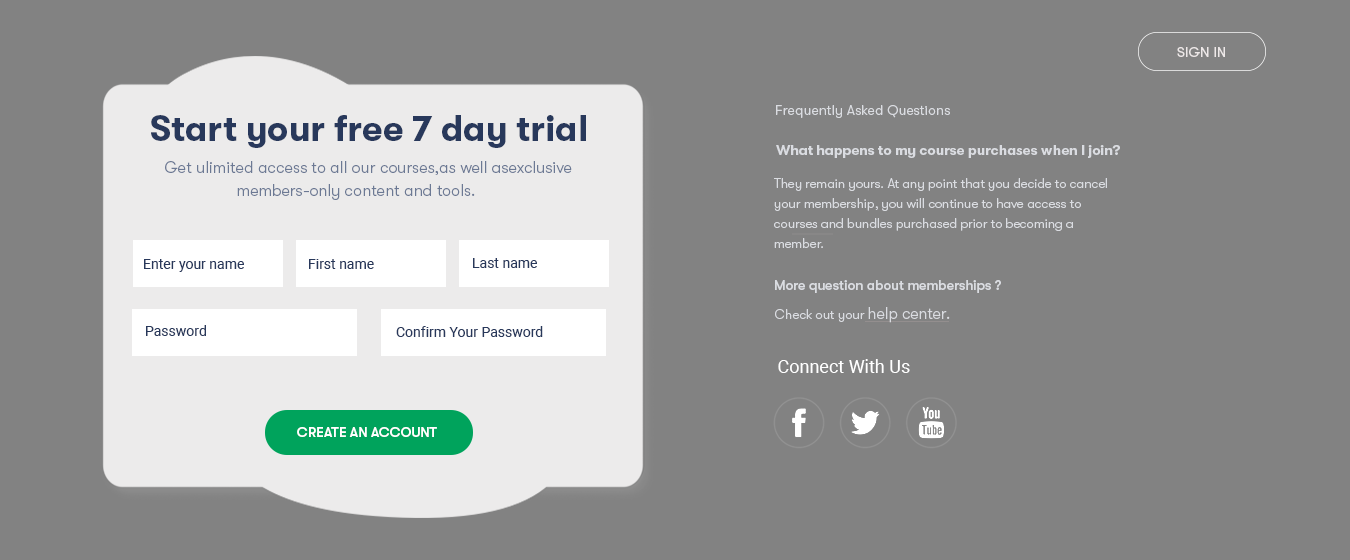
<style>
.page{position:relative;width:1350px;height:560px;background:#828282}
.page>*{position:absolute;margin:0}
.t1{font:14px "GTWalsheimPro-Regular";letter-spacing:0.01em;color:#ede8e8}
.t2{font:14px "GTWalsheimPro-Light";letter-spacing:0.01em;color:#dadce1}
.t3{font:36px "GTWalsheimPro-Bold";color:#28385b}
.t4{font:14px "GTWalsheimPro-Bold";color:#dadce1}
.t5{font:16px/18px "GTWalsheimPro-Light";letter-spacing:0.01em;color:#6c7994}
.t6{font:13px/20px "GTWalsheimPro-Light";color:#dadce1}
.t7{font:14px "Roboto-Regular";color:#28385b}
.t8{font:14px "GTWalsheimPro-Medium";color:#dadce1}
.t9{font:13px "GTWalsheimPro-Light";color:#dadce1}
.t10{font:16px "GTWalsheimPro-Light";color:#dadce1}
.t11{font:18px "Roboto-Regular";color:#ffffff}
.t12{font:14px "GTWalsheimPro-Medium";color:#ffffff}
</style>
<div class="page">
<p class="t1" style="left:1177px;top:47px;width:48px;height:10px">SIGN IN</p>
<p class="t2" style="left:776px;top:105px;width:174px;height:13px">Frequently Asked Questions</p>
<p class="t3" style="left:151px;top:115px;width:435px;height:33px">Start your free 7 day trial</p>
<p class="t4" style="left:776px;top:145px;width:344px;height:13px">What happens to my course purchases when I join?</p>
<p class="t5" style="left:165px;top:161px;width:407px;height:39px;text-align:right">Get ulimited access to all our courses,as well asexclusive <br>                 members-only content and tools.</p>
<p class="t6" style="left:774px;top:178px;width:333px;height:70px;text-align:right">They remain yours. At any point that you decide to cancel your membership, you will continue to have access to courses and bundles purchased prior to becoming a member.</p>
<p class="t7" style="left:144px;top:259px;width:100px;height:13px">Enter your name</p>
<p class="t7" style="left:309px;top:259px;width:65px;height:10px">First name</p>
<p class="t7" style="left:473px;top:258px;width:64px;height:10px">Last name</p>
<p class="t8" style="left:775px;top:280px;width:226px;height:13px">More question about memberships ?</p>
<p class="t9" style="left:775px;top:307px;width:175px;height:16px">Check out your <span class="t10">help center.</span></p>
<p class="t7" style="left:146px;top:325px;width:60px;height:11px">Password</p>
<p class="t7" style="left:396px;top:326px;width:147px;height:11px">Confirm Your Password</p>
<p class="t11" style="left:778px;top:359px;width:132px;height:14px">Connect With Us</p>
<p class="t12" style="left:297px;top:427px;width:140px;height:10px">CREATE AN ACCOUNT</p>
</div>
